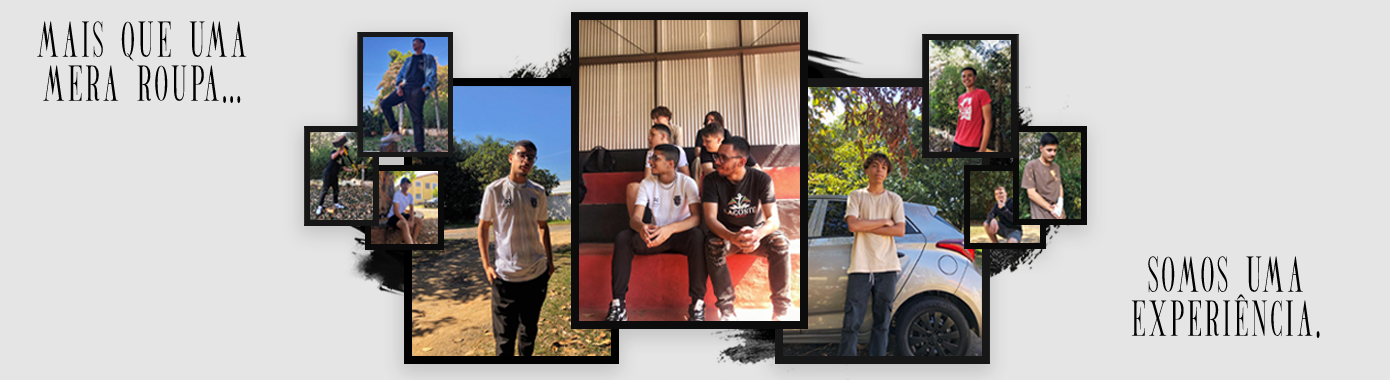
<style>
.page{position:relative;width:1390px;height:380px;background:#e5e5e5}
.page>*{position:absolute;margin:0}
.t1{font:37px/44px "BATICKRODISTSERIF";letter-spacing:0.1em;color:#000000}
</style>
<div class="page">
<p class="t1" style="left:37px;top:21px;width:210px;height:82px;text-align:center">mais que uma<br>mera roupa...</p>
<p class="t1" style="left:1131px;top:256px;width:189px;height:82px;text-align:center">somos uma <br>experiência.</p>
</div>
